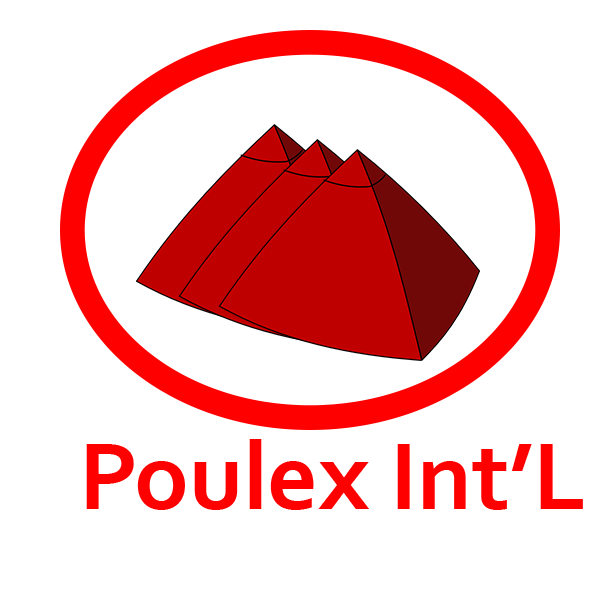
<style>
.page{position:relative;width:600px;height:600px;background:#ffffff}
.page>*{position:absolute;margin:0}
.t1{font:98.8px "Corbel-Bold";color:#ff0000}
</style>
<div class="page">
<p class="t1" style="left:86px;top:439px;width:497px;height:71px">Poulex Int’L</p>
</div>
